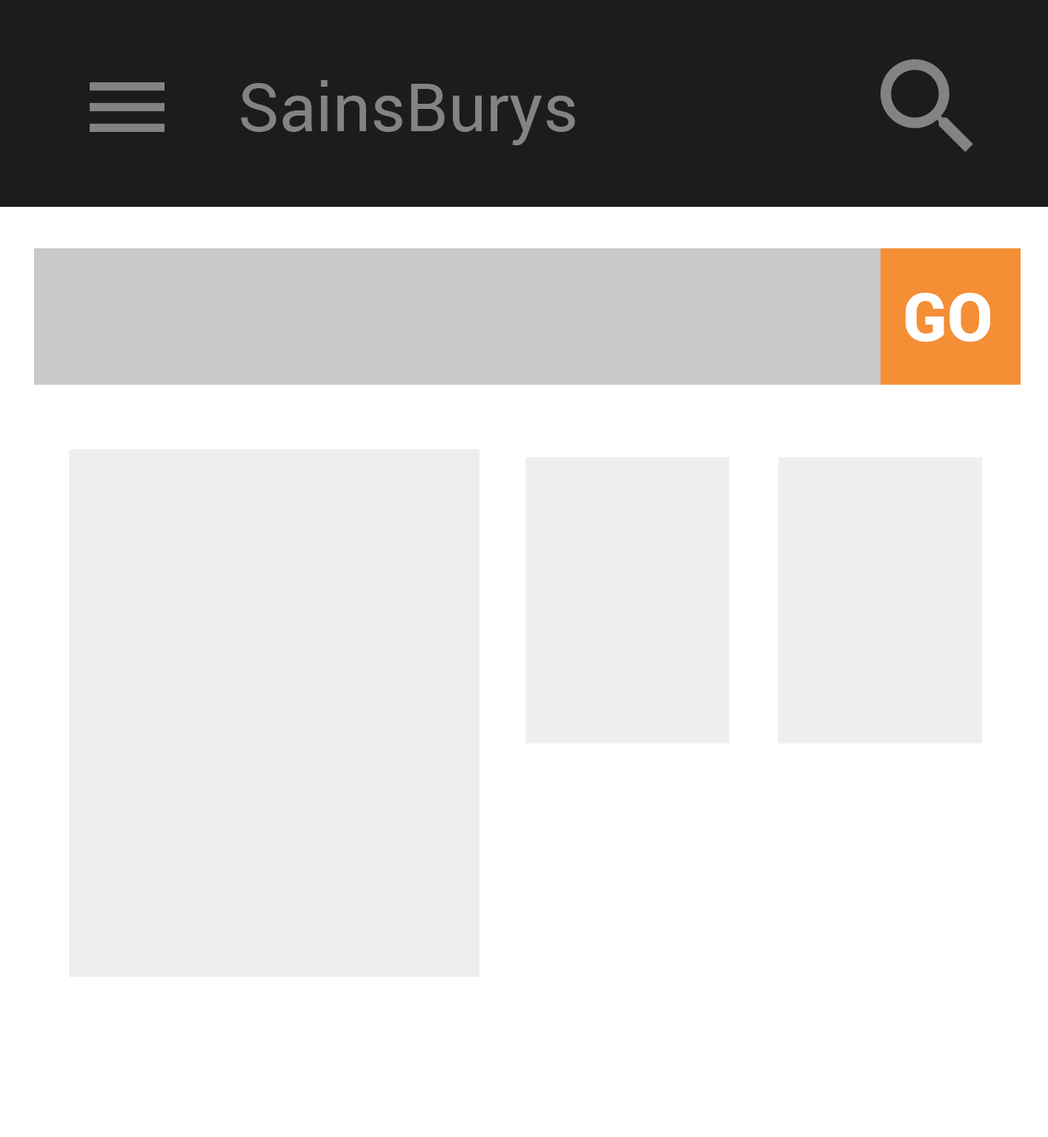
<style>
.page{position:relative;width:1048px;height:1137px;background:#ffffff}
.page>*{position:absolute;margin:0}
.t1{font:66.7px "Roboto-Regular";color:#838383}
.t2{font:66.7px "Roboto-Black";color:#ffffff}
</style>
<div class="page">
<p class="t1" style="left:241px;top:80px;width:334px;height:65px">SainsBurys</p>
<p class="t2" style="left:905px;top:293px;width:86px;height:49px">GO</p>
</div>
